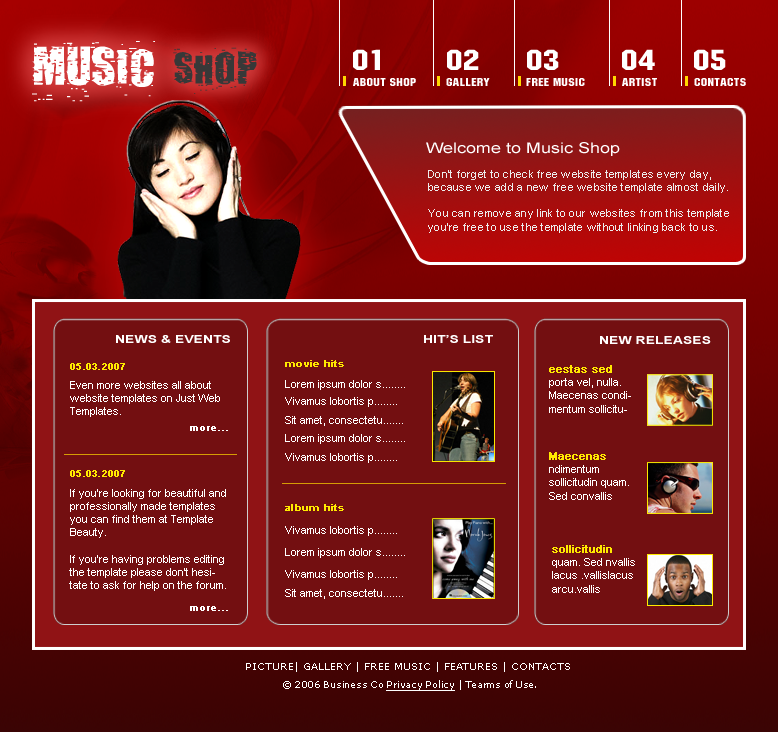
<style>
.page{position:relative;width:778px;height:732px;background:#730f11}
.page>*{position:absolute;margin:0}
.t1{font:60px "PUNKASSBITCH";color:#ffffff;text-transform:uppercase}
.t2{font:48px "PUNKASSBITCH";color:#383838;text-transform:uppercase}
.t3{font:28.8px "MachineITCbyBT-Regular";letter-spacing:0.025em;color:#ffffff;scale:1.25 1}
.t4{font:11.2px "MachineITCbyBT-Regular";letter-spacing:0.025em;color:#ffffff;scale:1.25 1}
.t5{font:14.4px "ArialMT";color:#ffffff;scale:1.25 1}
.t6{font:11px "ArialMT";letter-spacing:0.025em;color:#ececec}
.t7{font:11.2px "Arial-BoldMT";color:#ffffff;scale:1.25 1}
.t8{font:8.8px "Arial-BoldMT";letter-spacing:0.025em;color:#ffea00;scale:1.25 1}
.t9{font:11px "ArialMT";color:#ffffff}
.t10{font:11px "ArialMT";color:#ffea00;font-weight:bold}
.t11{font:10px "ArialMT";color:#ffffff;font-weight:bold}
.t12{font:10px "Verdana";color:#ffffff}
.t13{font:9px "Verdana";color:#ffffff;scale:0.96 1}
.t14{font:9px "Verdana";color:#ffffff;text-decoration:underline;scale:0.96 1}
</style>
<div class="page">
<p class="t1" style="left:32px;top:41px;width:123px;height:61px">music</p>
<p class="t2" style="left:173px;top:47px;width:85px;height:47px">shop</p>
<p class="t3" style="left:353px;top:49px;width:27px;height:21px">01</p>
<p class="t3" style="left:447px;top:49px;width:32px;height:21px">02</p>
<p class="t3" style="left:527px;top:49px;width:32px;height:21px">03</p>
<p class="t3" style="left:622px;top:49px;width:33px;height:21px">04</p>
<p class="t3" style="left:694px;top:49px;width:32px;height:21px">05</p>
<p class="t4" style="left:353px;top:78px;width:63px;height:8px">about shop</p>
<p class="t4" style="left:446px;top:78px;width:44px;height:8px">gallery</p>
<p class="t4" style="left:526px;top:78px;width:59px;height:8px">free music</p>
<p class="t4" style="left:622px;top:78px;width:35px;height:8px">artist</p>
<p class="t4" style="left:694px;top:78px;width:52px;height:8px">contacts</p>
<p class="t5" style="left:426px;top:142px;width:194px;height:14px">Welcome to Music Shop</p>
<p class="t6" style="left:428px;top:170px;width:301px;height:63px">Don't forget to check free website templates every day, because we add a new free website template almost daily.<br><br>You can remove any link to our websites from this template you're free to use the template without linking back to us.</p>
<p class="t7" style="left:116px;top:335px;width:114px;height:8px">NEWS &amp; EVENTS</p>
<p class="t7" style="left:424px;top:335px;width:69px;height:8px">HIT’S LIST</p>
<p class="t7" style="left:600px;top:336px;width:111px;height:8px">NEW RELEASES</p>
<p class="t8" style="left:70px;top:363px;width:55px;height:7px">05.03.2007</p>
<p class="t8" style="left:285px;top:360px;width:59px;height:7px">movie hits</p>
<p class="t9" style="left:549px;top:365px;width:82px;height:48px"><span class="t10">eestas sed<br></span>porta vel, nulla. Maecenas condimentum sollicitudin quam. Sed convallis lacus id arcu.</p>
<p class="t9" style="left:70px;top:381px;width:150px;height:36px">Even more websites all about website templates on Just Web Templates.</p>
<p class="t9" style="left:285px;top:380px;width:120px;height:10px">Lorem ipsum dolor s........</p>
<p class="t9" style="left:285px;top:397px;width:112px;height:10px">Vivamus lobortis p........</p>
<p class="t9" style="left:285px;top:416px;width:118px;height:10px">Sit amet, consectetu.......</p>
<p class="t11" style="left:190px;top:426px;width:38px;height:5px">more...</p>
<p class="t9" style="left:285px;top:434px;width:120px;height:10px">Lorem ipsum dolor s........</p>
<p class="t9" style="left:285px;top:453px;width:112px;height:10px">Vivamus lobortis p........</p>
<p class="t9" style="left:549px;top:452px;width:80px;height:48px"><span class="t10">Maecenas </span>ndimentum sollicitudin quam. Sed convallis lacus id arcu.</p>
<p class="t8" style="left:70px;top:470px;width:55px;height:7px">05.03.2007</p>
<p class="t9" style="left:69px;top:489px;width:157px;height:102px">If you're looking for beautiful and professionally made templates you can find them at Template Beauty.<br><br>If you're having problems editing the template please don't hesitate to ask for help on the forum.</p>
<p class="t8" style="left:285px;top:504px;width:59px;height:7px">album hits</p>
<p class="t9" style="left:285px;top:526px;width:112px;height:10px">Vivamus lobortis p........</p>
<p class="t9" style="left:552px;top:545px;width:83px;height:48px"><span class="t10">sollicitudin</span><br>quam. Sed nvallis lacus .vallislacus arcu.vallis</p>
<p class="t9" style="left:285px;top:548px;width:120px;height:10px">Lorem ipsum dolor s........</p>
<p class="t9" style="left:285px;top:570px;width:112px;height:10px">Vivamus lobortis p........</p>
<p class="t9" style="left:285px;top:589px;width:118px;height:10px">Sit amet, consectetu.......</p>
<p class="t11" style="left:190px;top:606px;width:38px;height:5px">more...</p>
<p class="t12" style="left:246px;top:662px;width:324px;height:10px">PICTURE| GALLERY | FREE MUSIC | FEATURES | CONTACTS</p>
<p class="t13" style="left:283px;top:680px;width:253px;height:11px">© 2006 Business Co <span class="t14">Privacy Policy</span> | Tearms of Use.</p>
</div>
